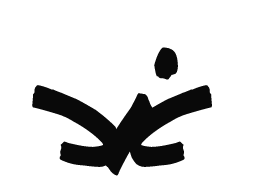
<style>
.page{position:relative;width:269px;height:192px;background:#ffffff}
.page>*{position:absolute;margin:0}
.t1{font:200px "SquicktPlain";color:#090909}
</style>
<div class="page">
<p class="t1" style="left:103px;top:47px;width:75px;height:129px">i</p>
<p class="t1" style="left:32px;top:85px;width:86px;height:82px;rotate:180deg">c</p>
<p class="t1" style="left:127px;top:85px;width:85px;height:82px">c</p>
</div>
